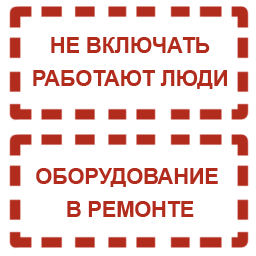
<style>
.page{position:relative;width:256px;height:256px;background:#ffffff}
.page>*{position:absolute;margin:0}
.t1{font:37px/32.5px "Arial-BoldMT";color:#b22c1d}
</style>
<div class="page">
<p class="t1" style="left:33px;top:37px;width:194px;height:52px;text-align:center">НЕ ВКЛЮЧАТЬ<br>РАБОТАЮТ ЛЮДИ</p>
<p class="t1" style="left:36px;top:168px;width:182px;height:49px;text-align:center">ОБОРУДОВАНИЕ <br>В РЕМОНТЕ</p>
</div>
